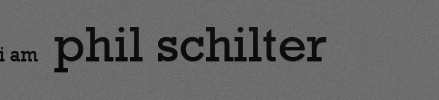
<style>
.page{position:relative;width:439px;height:100px}
.page>*{position:absolute;margin:0}
.t1{font:50px "Rockwell";color:#000000}
.t2{font:20px "Rockwell";color:#000000}
</style>
<div class="page">
<p class="t1" style="left:54px;top:27px;width:273px;height:45px">phil schilter</p>
<p class="t2" style="left:0px;top:47px;width:38px;height:14px">i am</p>
</div>
